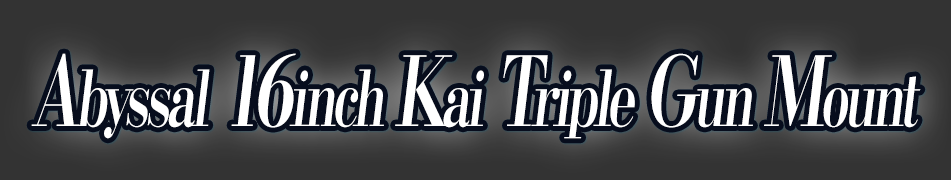
<style>
.page{position:relative;width:951px;height:180px;background:#333333}
.page>*{position:absolute;margin:0}
.t1{font:76.8px "KochoStd-Heavy";letter-spacing:-0.08em;color:#ffffff;font-style:italic;scale:0.68 1}
.t2{font:96px "KochoStd-Heavy";letter-spacing:-0.08em;color:#ffffff;font-style:italic;scale:0.68 1}
</style>
<div class="page">
<p class="t1" style="left:31px;top:53px;width:890px;height:86px"><span class="t2">A</span>byssal<span class="t2"> 16</span>inch <span class="t2">K</span>ai<span class="t2"> T</span>riple <span class="t2">G</span>un <span class="t2">M</span>ount</p>
</div>
